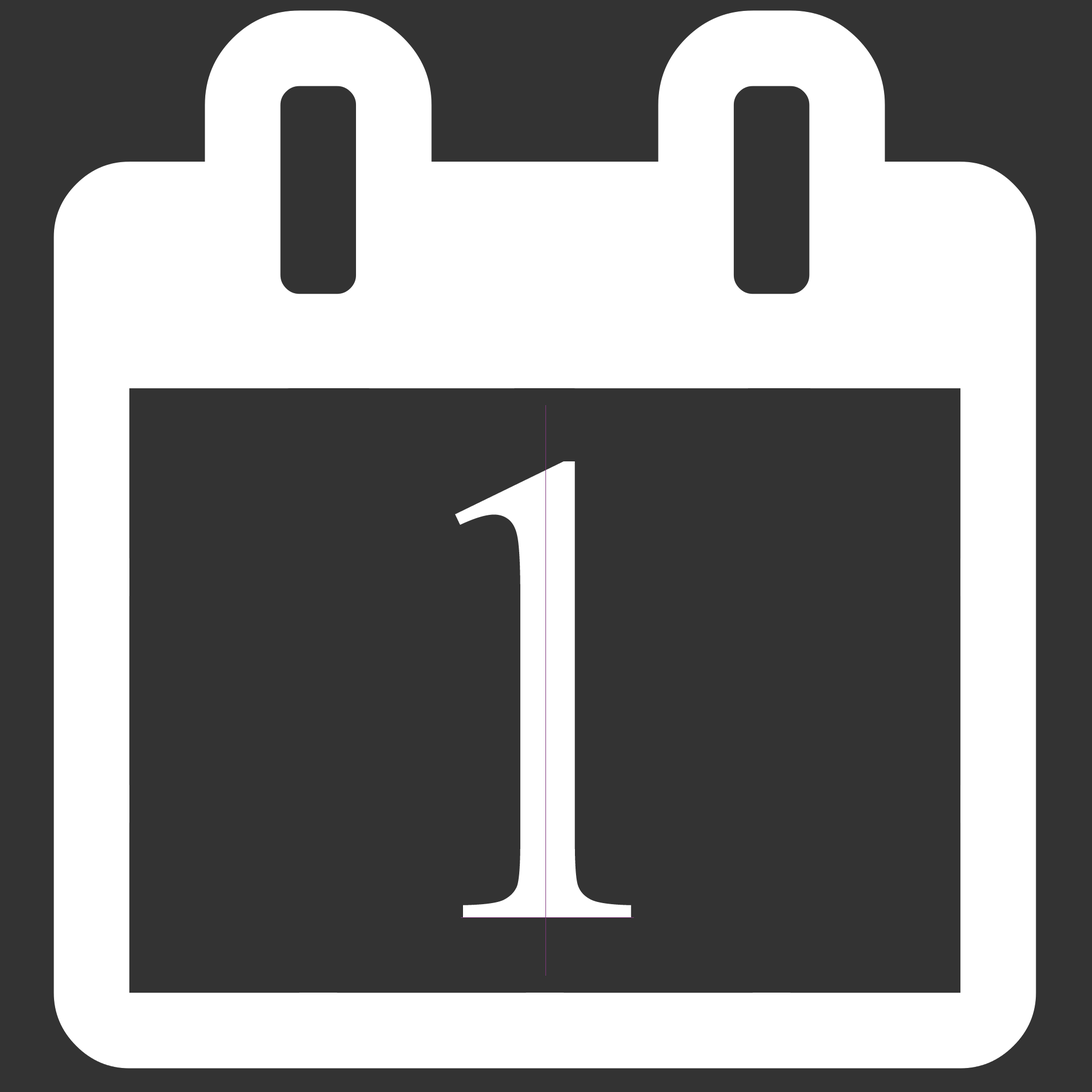
<style>
.page{position:relative;width:1092px;height:1092px;background:#333333}
.page>*{position:absolute;margin:0}
.t1{font:674.4px "TimesNewRomanPSMT";color:#ffffff}
</style>
<div class="page">
<p class="t1" style="left:455px;top:461px;width:176px;height:456px">1</p>
</div>
